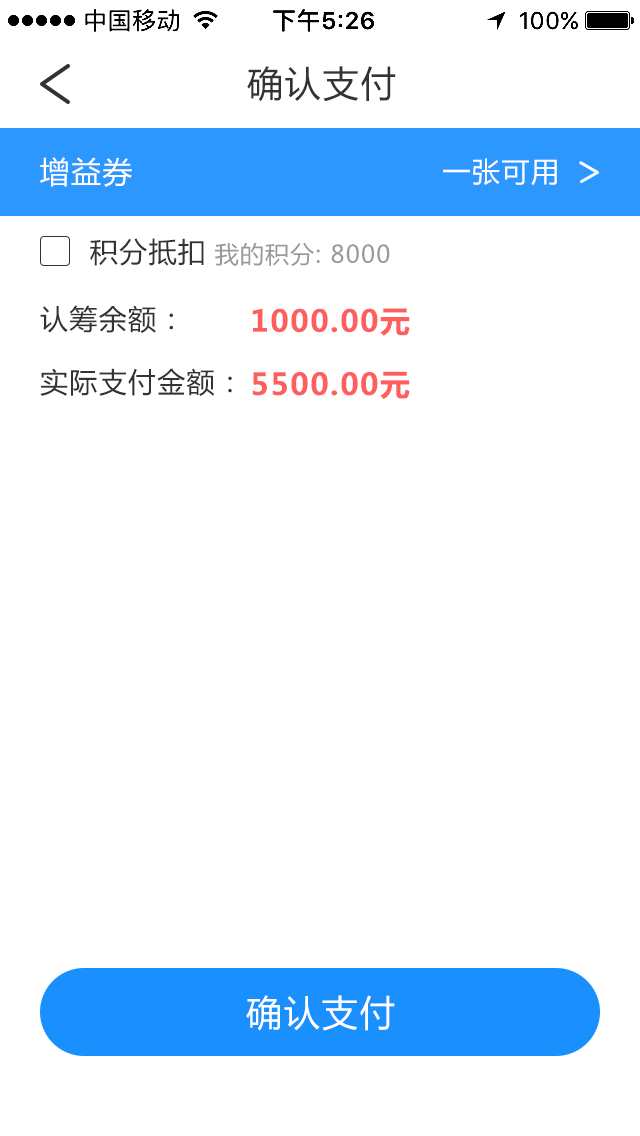
<style>
.page{position:relative;width:640px;height:1136px;background:#ffffff}
.page>*{position:absolute;margin:0}
.t1{font:36px "MicrosoftYaHei";letter-spacing:0.05em;color:#333333}
.t2{font:30px "MicrosoftYaHei";letter-spacing:0.05em;color:#ffffff}
.t3{font:28px "MicrosoftYaHei";letter-spacing:0.05em;color:#ffffff}
.t4{font:28px "MicrosoftYaHei";letter-spacing:0.05em;color:#333333}
.t5{font:24px "MicrosoftYaHei";letter-spacing:0.05em;color:#999999}
.t6{font:30px "MicrosoftYaHei-Bold";letter-spacing:0.05em;color:#ff5e5e}
.t7{font:36px "MicrosoftYaHei";letter-spacing:0.05em;color:#ffffff}
</style>
<div class="page">
<p class="t1" style="left:247px;top:66px;width:149px;height:36px">确认支付</p>
<p class="t2" style="left:40px;top:157px;width:92px;height:30px">增益券</p>
<p class="t3" style="left:443px;top:158px;width:114px;height:28px">一张可用</p>
<p class="t4" style="left:90px;top:238px;width:114px;height:28px">积分抵扣</p>
<p class="t5" style="left:215px;top:242px;width:175px;height:24px">我的积分: 8000</p>
<p class="t4" style="left:40px;top:305px;width:133px;height:28px">认筹余额：</p>
<p class="t6" style="left:252px;top:308px;width:158px;height:28px">1000.00元</p>
<p class="t4" style="left:40px;top:368px;width:192px;height:28px">实际支付金额：</p>
<p class="t6" style="left:252px;top:371px;width:158px;height:28px">5500.00元</p>
<p class="t7" style="left:246px;top:995px;width:149px;height:36px">确认支付</p>
</div>
